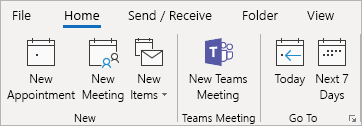
<style>
.page{position:relative;width:362px;height:126px;background:#f3f2f1}
.page>*{position:absolute;margin:0}
.t1{font:13.3px "SegoeUI-Semilight";color:#000000}
.t2{font:13.3px "SegoeUI";color:#000000}
.t3{font:12px/16px "SegoeUI-Semilight";color:#000000}
.t4{font:12px "SegoeUI-Semilight";color:#000000}
.t5{font:11.3px "SegoeUI-Semilight";color:#000000}
</style>
<div class="page">
<p class="t1" style="left:13px;top:10px;width:18px;height:10px">File</p>
<p class="t2" style="left:65px;top:11px;width:35px;height:9px">Home</p>
<p class="t1" style="left:128px;top:10px;width:84px;height:12px">Send / Receive</p>
<p class="t1" style="left:243px;top:10px;width:35px;height:10px">Folder</p>
<p class="t1" style="left:307px;top:11px;width:27px;height:9px">View</p>
<p class="t3" style="left:7px;top:74px;width:68px;height:28px;text-align:center">New<br>Appointment</p>
<p class="t3" style="left:82px;top:74px;width:42px;height:28px;text-align:center">New<br>Meeting</p>
<p class="t3" style="left:131px;top:74px;width:30px;height:25px;text-align:center">New<br>Items</p>
<p class="t3" style="left:189px;top:74px;width:58px;height:28px;text-align:center">New Teams<br>Meeting</p>
<p class="t4" style="left:274px;top:74px;width:32px;height:12px">Today</p>
<p class="t3" style="left:316px;top:74px;width:33px;height:28px;text-align:center">Next 7<br>Days</p>
<p class="t5" style="left:74px;top:114px;width:22px;height:8px">New</p>
<p class="t5" style="left:182px;top:114px;width:73px;height:10px">Teams Meeting</p>
<p class="t5" style="left:289px;top:114px;width:28px;height:8px">Go To</p>
</div>
